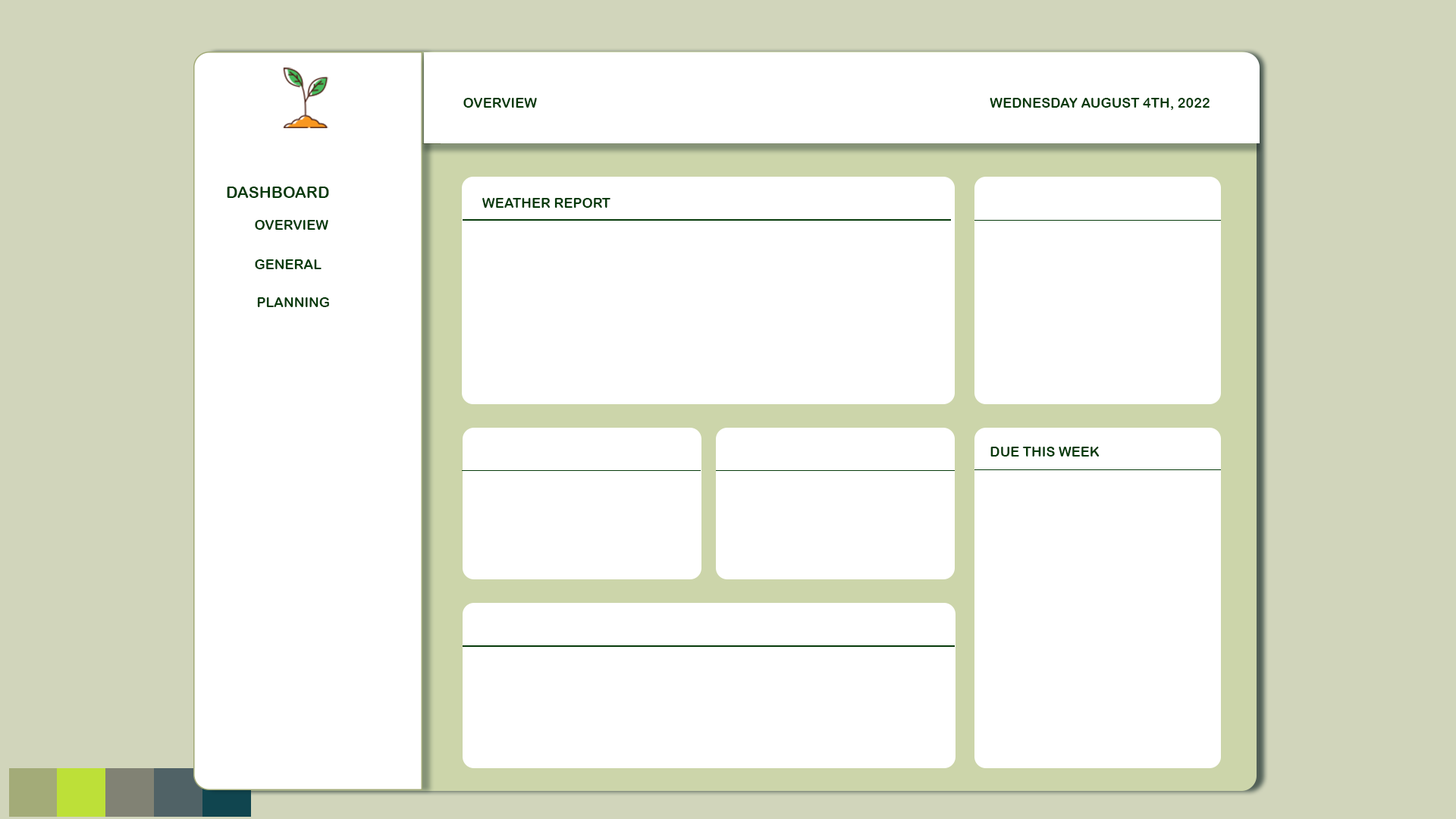
<style>
.page{position:relative;width:1456px;height:819px;background:#ffffff}
.page>*{position:absolute;margin:0}
.t1{font:13.6px "ArialRoundedMTBold";color:#073b0b;text-transform:uppercase}
.t2{font:22.7px "ArialRoundedMTBold";color:#073b0b;font-variant:small-caps}
</style>
<div class="page">
<p class="t1" style="left:463px;top:98px;width:74px;height:10px">OVERVIEW</p>
<p class="t1" style="left:990px;top:98px;width:220px;height:12px">WEdnesday August 4th, 2022</p>
<p class="t2" style="left:227px;top:187px;width:102px;height:11px">dashboard</p>
<p class="t1" style="left:482px;top:198px;width:128px;height:10px">Weather Report</p>
<p class="t1" style="left:255px;top:220px;width:73px;height:10px">OVERVIEW</p>
<p class="t1" style="left:255px;top:259px;width:67px;height:10px">GENERAL</p>
<p class="t1" style="left:257px;top:297px;width:72px;height:10px">Planning</p>
<p class="t1" style="left:990px;top:447px;width:110px;height:10px">Due This Week</p>
</div>
